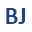
<style>
.page{position:relative;width:32px;height:32px;background:#ffffff}
.page>*{position:absolute;margin:0}
.t1{font:25px "Calibri-Bold";color:#1d4589}
</style>
<div class="page">
<p class="t1" style="left:6px;top:8px;width:20px;height:16px">BJ</p>
</div>
